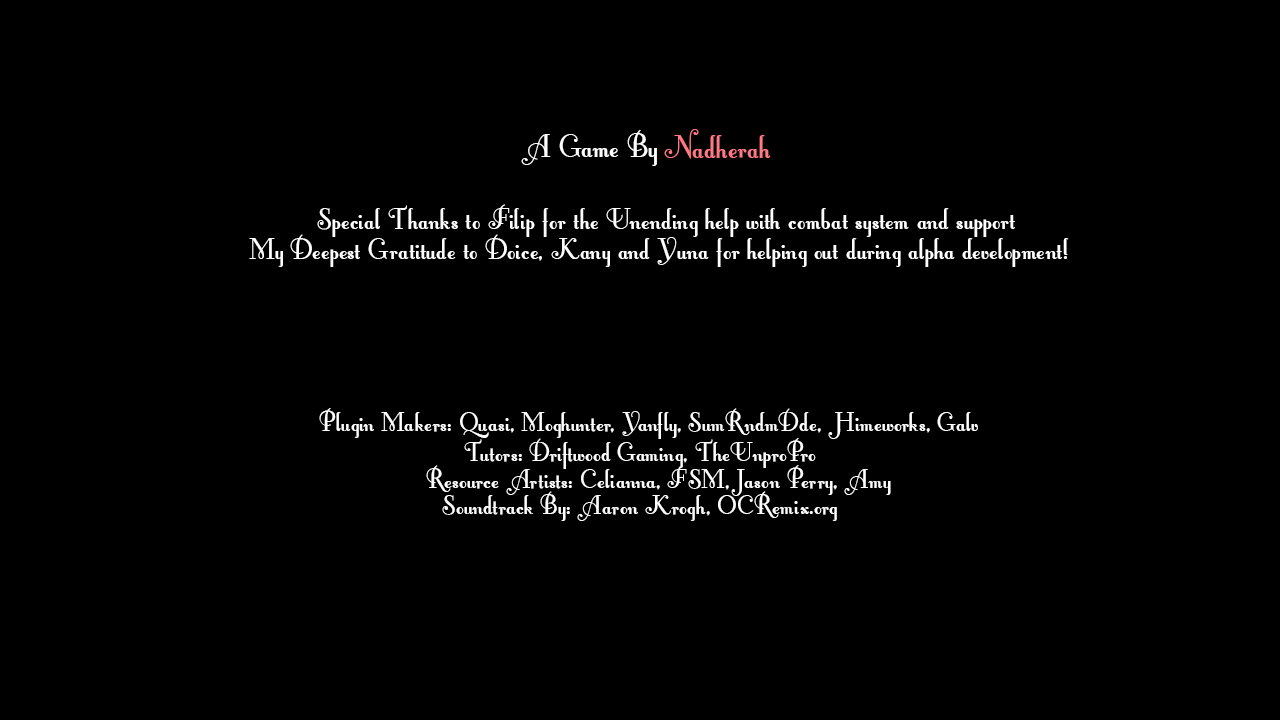
<style>
.page{position:relative;width:1280px;height:720px;background:#000000}
.page>*{position:absolute;margin:0}
.t1{font:40px "FontleroyBrownNF";color:#ffffff}
.t2{font:40px "FontleroyBrownNF";color:#ff7983}
.t3{font:36.1px "FontleroyBrownNF";color:#ffffff}
.t4{font:33.3px "FontleroyBrownNF";color:#ffffff}
</style>
<div class="page">
<p class="t1" style="left:521px;top:129px;width:136px;height:37px">A Game By</p>
<p class="t2" style="left:664px;top:129px;width:107px;height:30px">Nadherah</p>
<p class="t3" style="left:317px;top:204px;width:698px;height:33px">Special Thanks to Filip for the Unending help with combat system and support</p>
<p class="t3" style="left:249px;top:234px;width:820px;height:33px">My Deepest Gratitude to Doice, Kany and Yuna for helping out during alpha development!</p>
<p class="t4" style="left:319px;top:408px;width:659px;height:31px">Plugin Makers: Quasi, Moghunter, Yanfly, SumRndmDde, Himeworks, Galv</p>
<p class="t4" style="left:464px;top:438px;width:352px;height:31px">Tutors: Driftwood Gaming, TheUnproPro</p>
<p class="t4" style="left:426px;top:465px;width:465px;height:31px">Resource Artists: Celianna, FSM, Jason Perry, Amy</p>
<p class="t4" style="left:442px;top:491px;width:395px;height:30px">Soundtrack By: Aaron Krogh, OCRemix.org</p>
</div>
